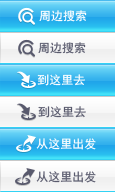
<style>
.page{position:relative;width:115px;height:192px}
.page>*{position:absolute;margin:0}
.t1{font:11.8px "SimHei";color:#ffffff}
.t2{font:11.8px "SimHei";color:#595a6d}
.t3{font:12px "SimHei";color:#ffffff}
.t4{font:12px "SimHei";color:#595a6d}
</style>
<div class="page">
<p class="t1" style="left:39px;top:10px;width:48px;height:12px">周边搜索</p>
<p class="t2" style="left:38px;top:42px;width:48px;height:12px">周边搜索</p>
<p class="t1" style="left:37px;top:74px;width:48px;height:12px">到这里去</p>
<p class="t2" style="left:38px;top:106px;width:48px;height:12px">到这里去</p>
<p class="t3" style="left:36px;top:138px;width:60px;height:12px">从这里出发</p>
<p class="t4" style="left:36px;top:171px;width:60px;height:12px">从这里出发</p>
</div>
